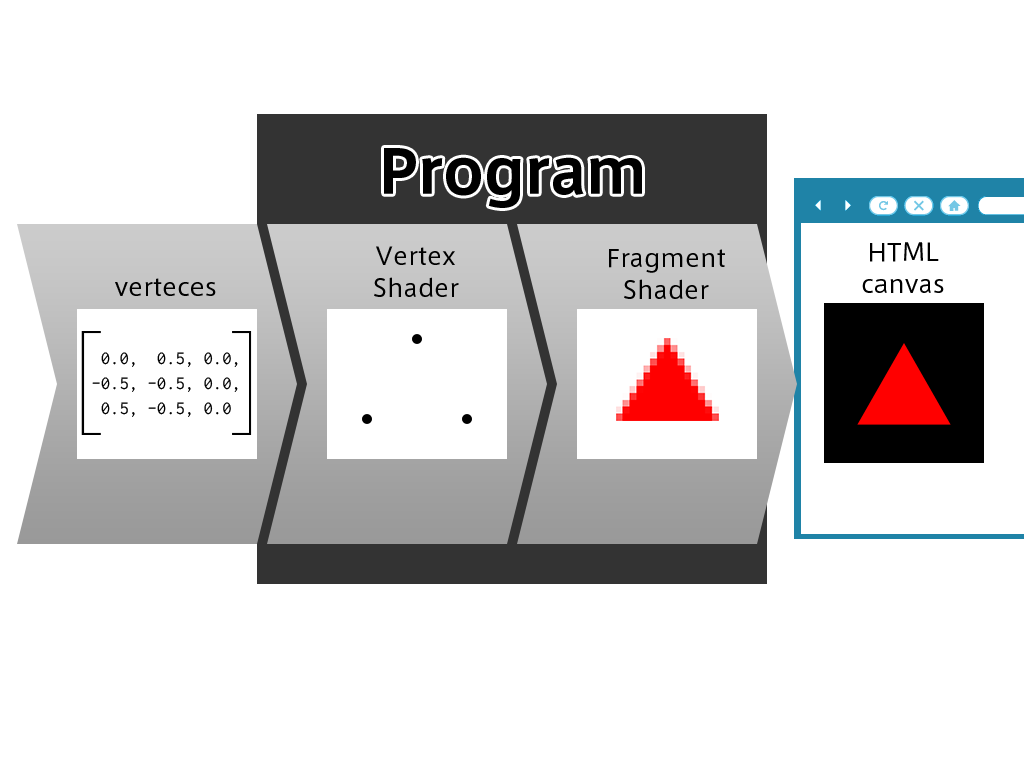
<style>
.page{position:relative;width:1024px;height:768px;background:#ffffff}
.page>*{position:absolute;margin:0}
.t1{font:60px "AxisStd-Bold";color:#000000}
.t2{font:24px/32px "AxisStd-Regular";color:#000000}
.t3{font:24px "AxisStd-Regular";color:#000000}
.t4{font:106.6px "AxisStd-UltraLight";color:#000000}
.t5{font:18.6px/24.8px "Ricty-Regular";color:#000000}
</style>
<div class="page">
<p class="t1" style="left:384px;top:148px;width:258px;height:60px">Program</p>
<p class="t2" style="left:374px;top:246px;width:85px;height:51px;text-align:center">Vertex<br>Shader</p>
<p class="t2" style="left:862px;top:242px;width:82px;height:51px;text-align:center">HTML<br>canvas</p>
<p class="t2" style="left:609px;top:249px;width:116px;height:50px;text-align:center">Fragment<br>Shader</p>
<p class="t3" style="left:115px;top:278px;width:101px;height:18px">verteces</p>
<p class="t4" style="left:81px;top:331px;width:171px;height:104px">[    ]</p>
<p class="t5" style="left:92px;top:352px;width:146px;height:65px">0.0,  0.5, 0.0,<br>-0.5, -0.5, 0.0,<br> 0.5, -0.5, 0.0</p>
</div>
